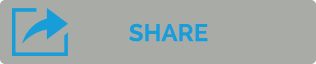
<style>
.page{position:relative;width:316px;height:64px;background:#a9aba6}
.page>*{position:absolute;margin:0}
.t1{font:24px "Raleway-Bold";color:#189dd9;text-transform:uppercase}
</style>
<div class="page">
<p class="t1" style="left:129px;top:23px;width:79px;height:19px">Share</p>
</div>
